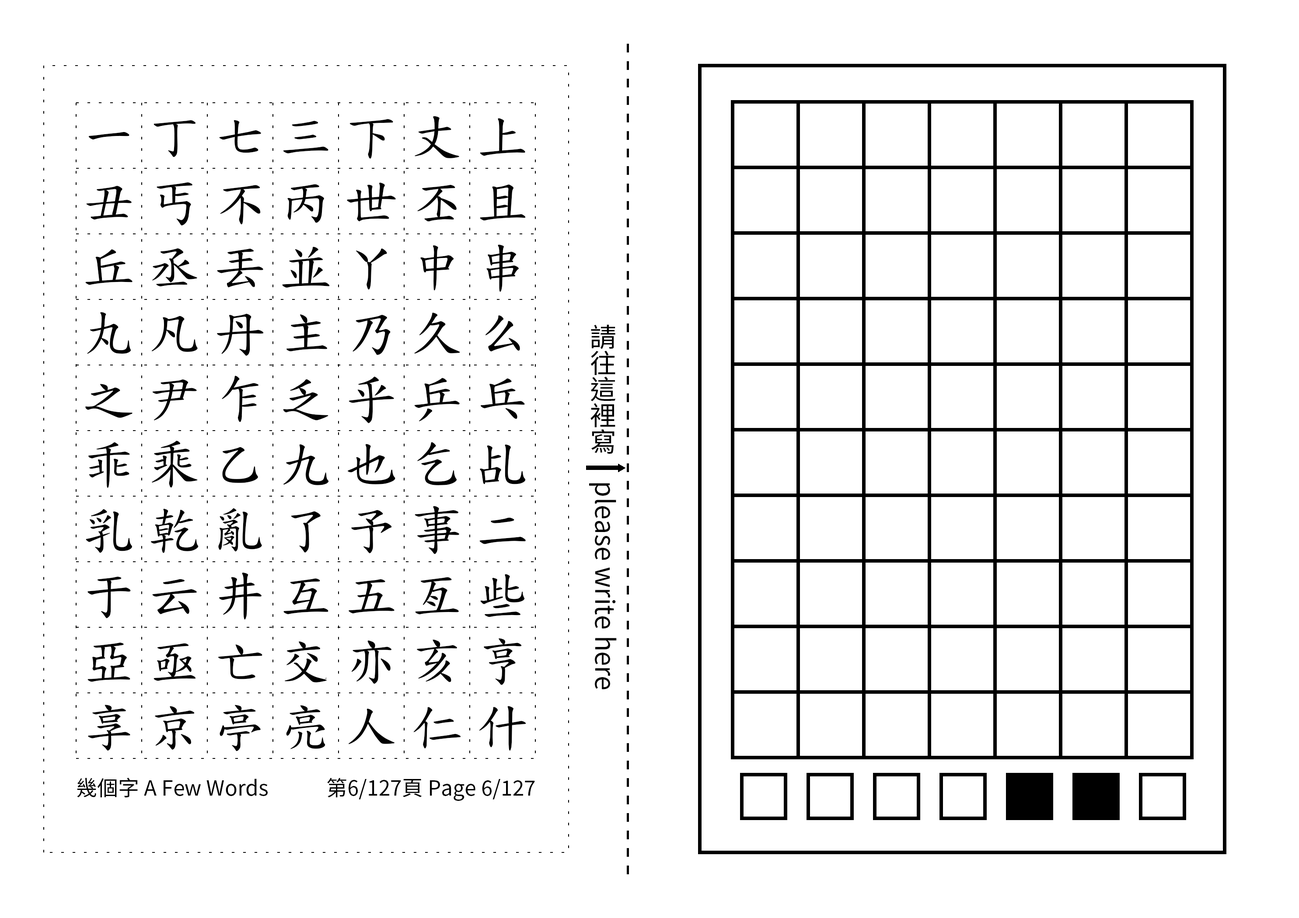
<style>
.page{position:relative;width:1299px;height:918px;background:#ffffff}
.page>*{position:absolute;margin:0}
.t1{font:52.5px/65.6px "TW-Kai-98_1";letter-spacing:0.25em;color:#000000}
.t2{font:26.2px "SourceHanSansTC-Regular";color:#000000}
.t3{font:21px "SourceHanSansTC-Regular";color:#000000}
</style>
<div class="page">
<p class="t1" style="left:85px;top:116px;width:441px;height:636px;text-align:center">一丁七三下丈上丑丐不丙世丕且丘丞丟並丫中串丸凡丹主乃久么之尹乍乏乎乒乓乖乘乙九也乞乩乳乾亂了予事二于云井互五亙些亞亟亡交亦亥亨享京亭亮人仁什</p>
<p class="t2" style="left:589px;top:324px;width:28px;height:366px;text-align:center">請往這裡寫　please write here</p>
<p class="t3" style="left:77px;top:778px;width:191px;height:20px">幾個字 A Few Words</p>
<p class="t3" style="left:327px;top:778px;width:208px;height:23px">第6/127頁 Page 6/127</p>
</div>
